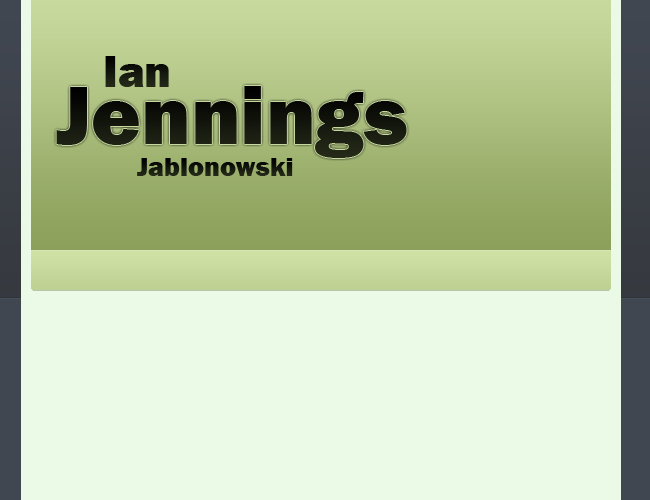
<style>
.page{position:relative;width:650px;height:500px;background:#ebf9e7}
.page>*{position:absolute;margin:0}
.t1{font:45.9px "FranklinGothic-Heavy";color:#16190f}
.t2{font:84.7px "FranklinGothic-Heavy";color:#12150c}
.t3{font:27.1px "FranklinGothic-Heavy";color:#15180e}
</style>
<div class="page">
<p class="t1" style="left:105px;top:56px;width:64px;height:31px">Ian</p>
<p class="t2" style="left:56px;top:86px;width:351px;height:72px">Jennings</p>
<p class="t3" style="left:137px;top:158px;width:156px;height:18px">Jablonowski</p>
</div>
